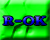
<style>
.page{position:relative;width:50px;height:40px}
.page>*{position:absolute;margin:0}
.t1{font:11.2px "MyungjoXB-HM";scale:1.53 1}
</style>
<div class="page">
<p class="t1" style="left:3px;top:16px;width:44px;height:9px">R-OK</p>
</div>
